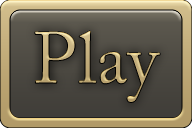
<style>
.page{position:relative;width:192px;height:128px}
.page>*{position:absolute;margin:0}
.t1{font:72px "ACaslonPro-Regular"}
</style>
<div class="page">
<p class="t1" style="left:35px;top:31px;width:125px;height:72px">Play</p>
</div>
